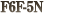
<style>
.page{position:relative;width:64px;height:13px;background:#ffffff}
.page>*{position:absolute;margin:0}
.t1{font:15px "RyuminPro-ExBold";letter-spacing:-0.06em;color:#4a3f32;font-weight:bold;scale:0.9 1}
</style>
<div class="page">
<p class="t1" style="left:0px;top:1px;width:44px;height:12px">F6F-5N</p>
</div>
